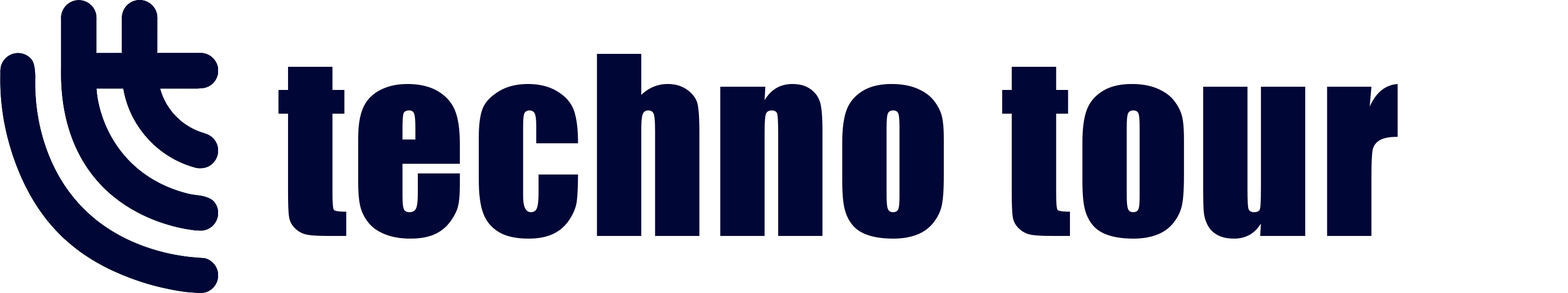
<style>
.page{position:relative;width:1568px;height:293px;background:#ffffff}
.page>*{position:absolute;margin:0}
.t1{font:230.2px "Impact";letter-spacing:0.025em;color:#000635}
</style>
<div class="page">
<p class="t1" style="left:278px;top:54px;width:1120px;height:185px">techno tour</p>
</div>
